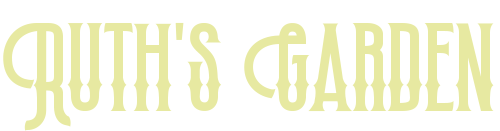
<style>
.page{position:relative;width:500px;height:131px;background:#ffffff}
.page>*{position:absolute;margin:0}
.t1{font:145.8px "MillgroveDEMO";color:#e7e9a1}
</style>
<div class="page">
<p class="t1" style="left:3px;top:22px;width:491px;height:109px">Ruth's Garden</p>
</div>
